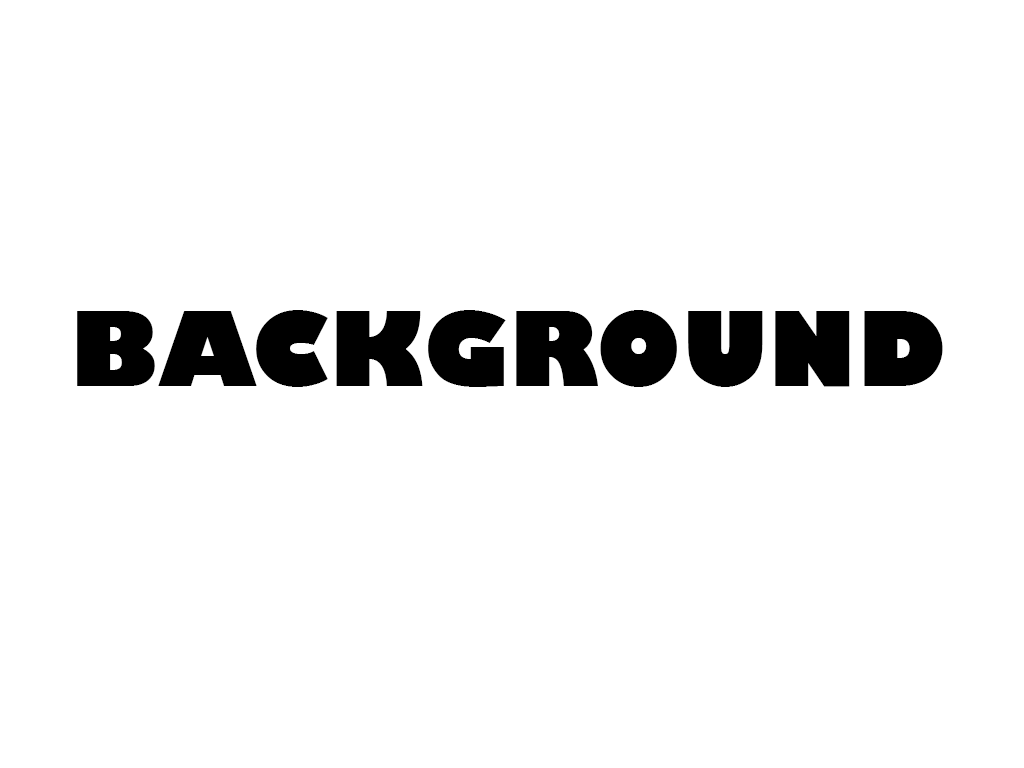
<style>
.page{position:relative;width:1024px;height:768px;background:#ffffff}
.page>*{position:absolute;margin:0}
.t1{font:100px "GillSans-UltraBold";color:#000000}
</style>
<div class="page">
<p class="t1" style="left:77px;top:310px;width:866px;height:77px">BACKGROUND</p>
</div>
